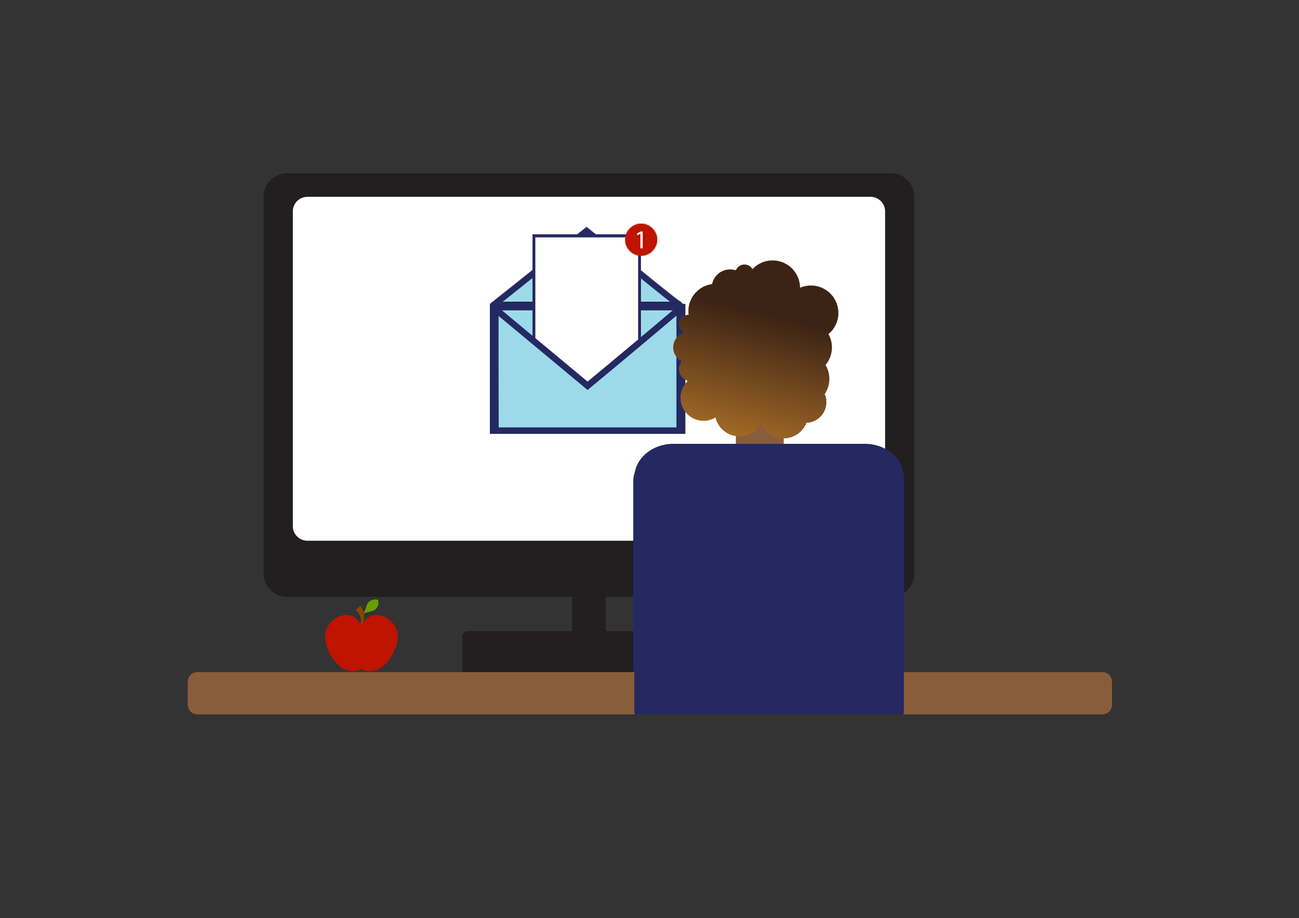
<style>
.page{position:relative;width:1299px;height:918px;background:#333333}
.page>*{position:absolute;margin:0}
.t1{font:25.9px "MyriadPro-Regular";color:#ffffff}
</style>
<div class="page">
<p class="t1" style="left:637px;top:231px;width:6px;height:17px">1</p>
</div>
